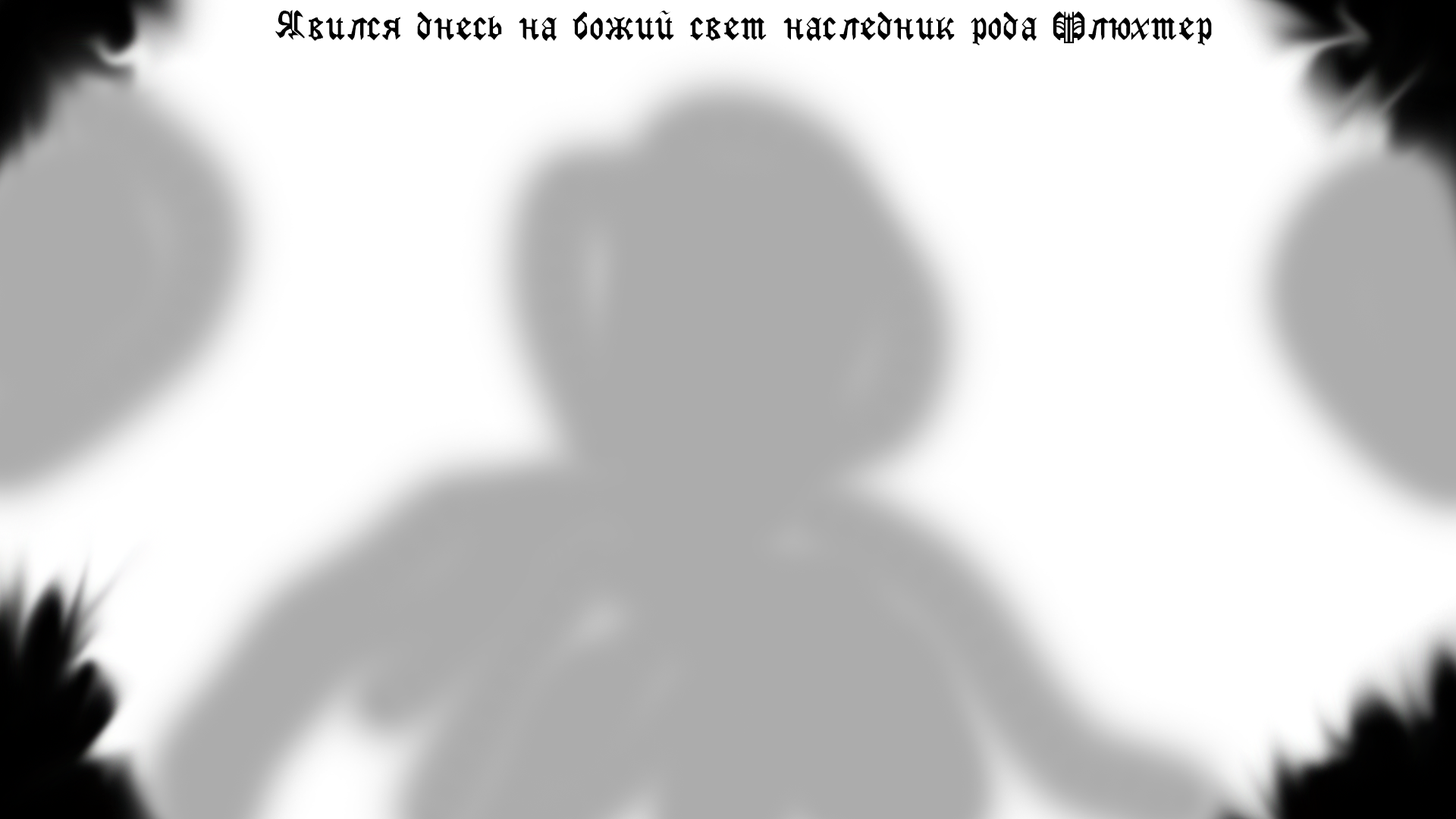
<style>
.page{position:relative;width:1456px;height:819px;background:#ffffff}
.page>*{position:absolute;margin:0}
.t1{font:9.1px "GothicRusMedium";color:#000000}
</style>
<div class="page">
<p class="t1" style="left:275px;top:10px;width:937px;height:35px;text-align:center">Явился днесь на божий свет наследник рода Флюхтер</p>
</div>
